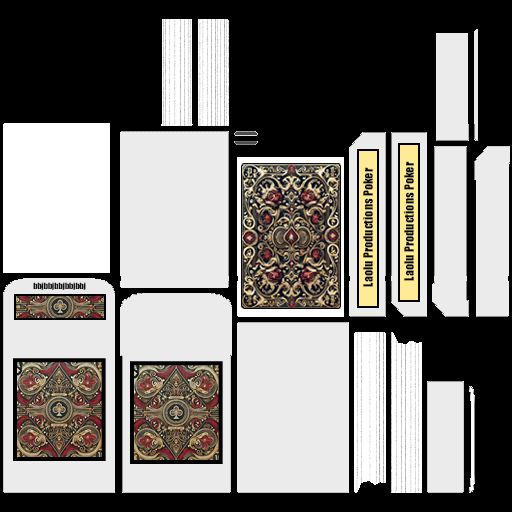
<style>
.page{position:relative;width:512px;height:512px;background:#000000}
.page>*{position:absolute;margin:0}
.t1{font:12px "Impact";color:#000000}
.t2{font:8px "Impact";color:#121212}
</style>
<div class="page">
<p class="t1" style="left:404px;top:161px;width:10px;height:120px;rotate:-90deg">Laolu Productions Poker</p>
<p class="t1" style="left:363px;top:167px;width:10px;height:120px;rotate:-90deg">Laolu Productions Poker</p>
<p class="t2" style="left:33px;top:282px;width:53px;height:8px">bbjbbjbbjbbjbbj</p>
</div>
